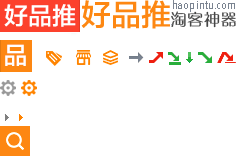
<style>
.page{position:relative;width:236px;height:156px;background:#ffffff}
.page>*{position:absolute;margin:0}
.t1{font:24px "FZLTZHK--GBK1-0";color:#ffffff}
.t2{font:30px "FZLTZHK--GBK1-0";color:#fd8712}
.t3{font:12px "AlNile";color:#7b8491}
.t4{font:12px "AvenirNextCondensed-Regular";color:#7b8491}
</style>
<div class="page">
<p class="t1" style="left:4px;top:4px;width:72px;height:23px">好品推</p>
<p class="t2" style="left:81px;top:0px;width:92px;height:29px">好品推<span class="t3">.</span></p>
<p class="t4" style="left:173px;top:0px;width:65px;height:12px">haopintu.comi</p>
<p class="t1" style="left:5px;top:44px;width:21px;height:22px">品</p>
</div>
